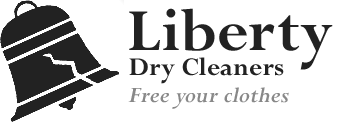
<style>
.page{position:relative;width:350px;height:122px;background:#ffffff}
.page>*{position:absolute;margin:0}
.t1{font:65.9px "Perpetua-Bold";color:#222222}
.t2{font:28px "Perpetua-Bold";color:#222222}
.t3{font:24.7px "Perpetua-BoldItalic";color:#888888}
</style>
<div class="page">
<p class="t1" style="left:129px;top:8px;width:204px;height:62px">Liberty</p>
<p class="t2" style="left:129px;top:57px;width:155px;height:27px">Dry Cleaners</p>
<p class="t3" style="left:128px;top:87px;width:161px;height:22px">Free your clothes</p>
</div>
